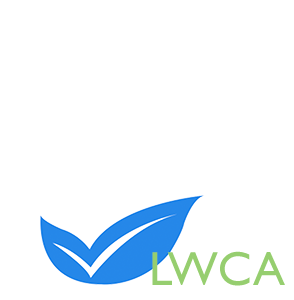
<style>
.page{position:relative;width:294px;height:300px;background:#ffffff}
.page>*{position:absolute;margin:0}
.t1{font:48px "GillSansMT";color:#96ce6f}
</style>
<div class="page">
<p class="t1" style="left:152px;top:251px;width:133px;height:35px">LWCA</p>
</div>
